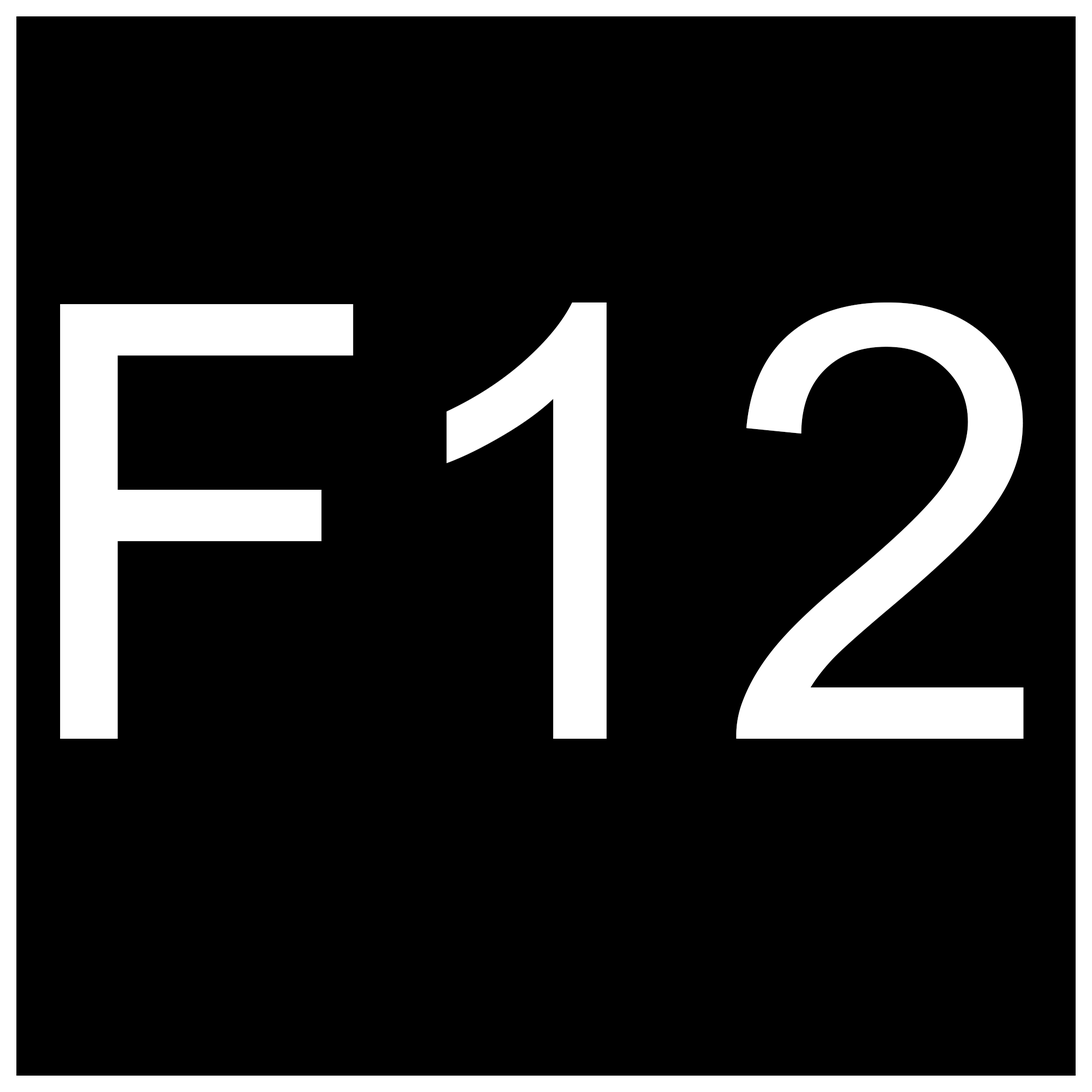
<style>
.page{position:relative;width:1092px;height:1092px;background:#000000}
.page>*{position:absolute;margin:0}
.t1{font:606.7px "ArialMT";color:#ffffff}
</style>
<div class="page">
<p class="t1" style="left:60px;top:302px;width:964px;height:437px">F12</p>
</div>
